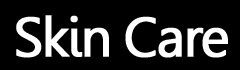
<style>
.page{position:relative;width:240px;height:70px;background:#000000}
.page>*{position:absolute;margin:0}
.t1{font:55px "Gisha";letter-spacing:-0.05em;color:#ffffff;font-weight:bold}
</style>
<div class="page">
<p class="t1" style="left:16px;top:15px;width:212px;height:43px">Skin Care</p>
</div>
